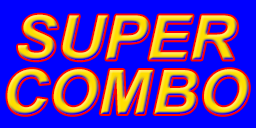
<style>
.page{position:relative;width:256px;height:128px;background:#0000ff}
.page>*{position:absolute;margin:0}
.t1{font:61.3px/54.7px "Arial-BoldItalicMT";scale:1.05 1}
</style>
<div class="page">
<p class="t1" style="left:7px;top:14px;width:242px;height:101px;text-align:center">SUPER<br>COMBO</p>
</div>
